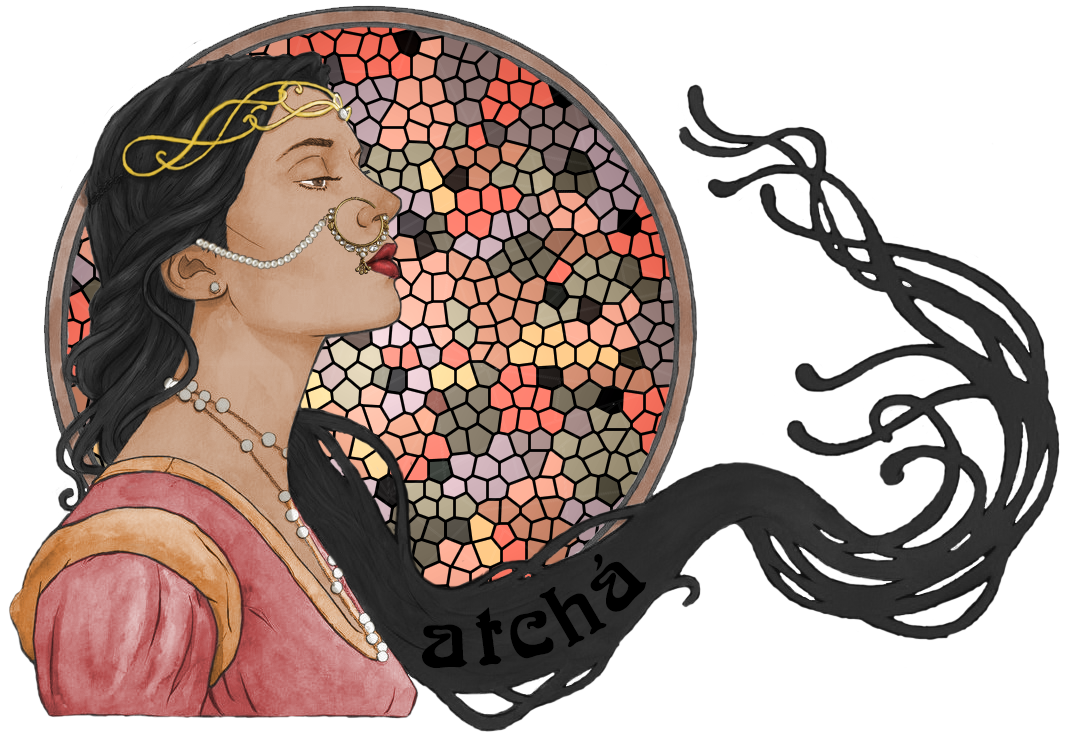
<style>
.page{position:relative;width:1068px;height:744px;background:#ffffff}
.page>*{position:absolute;margin:0}
.t1{font:96px "Bocklin";color:#000000}
</style>
<div class="page">
<p class="t1" style="left:422px;top:554px;width:225px;height:114px">atchá</p>
</div>
